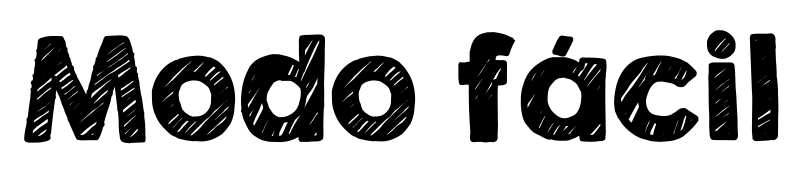
<style>
.page{position:relative;width:804px;height:187px;background:#ffffff}
.page>*{position:absolute;margin:0}
.t1{font:125px "KGSecondChancesSketch";color:#000000;font-weight:bold}
</style>
<div class="page">
<p class="t1" style="left:24px;top:30px;width:755px;height:114px">Modo fácil</p>
</div>
